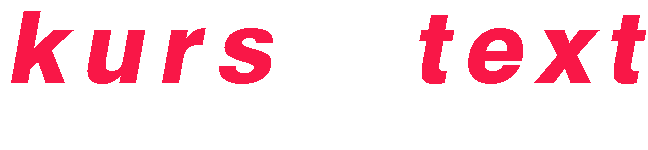
<style>
.page{position:relative;width:648px;height:150px;background:#ffffff}
.page>*{position:absolute;margin:0}
.t1{font:100px "Swiss721BT-Heavy";letter-spacing:0.14em;color:#fa1747;font-style:italic}
.t2{font:100px "Swiss721BT-Heavy";letter-spacing:0.14em;color:#ffffff;font-style:italic}
</style>
<div class="page">
<p class="t1" style="left:11px;top:11px;width:635px;height:73px">kurs<span class="t2">to</span>text</p>
</div>
